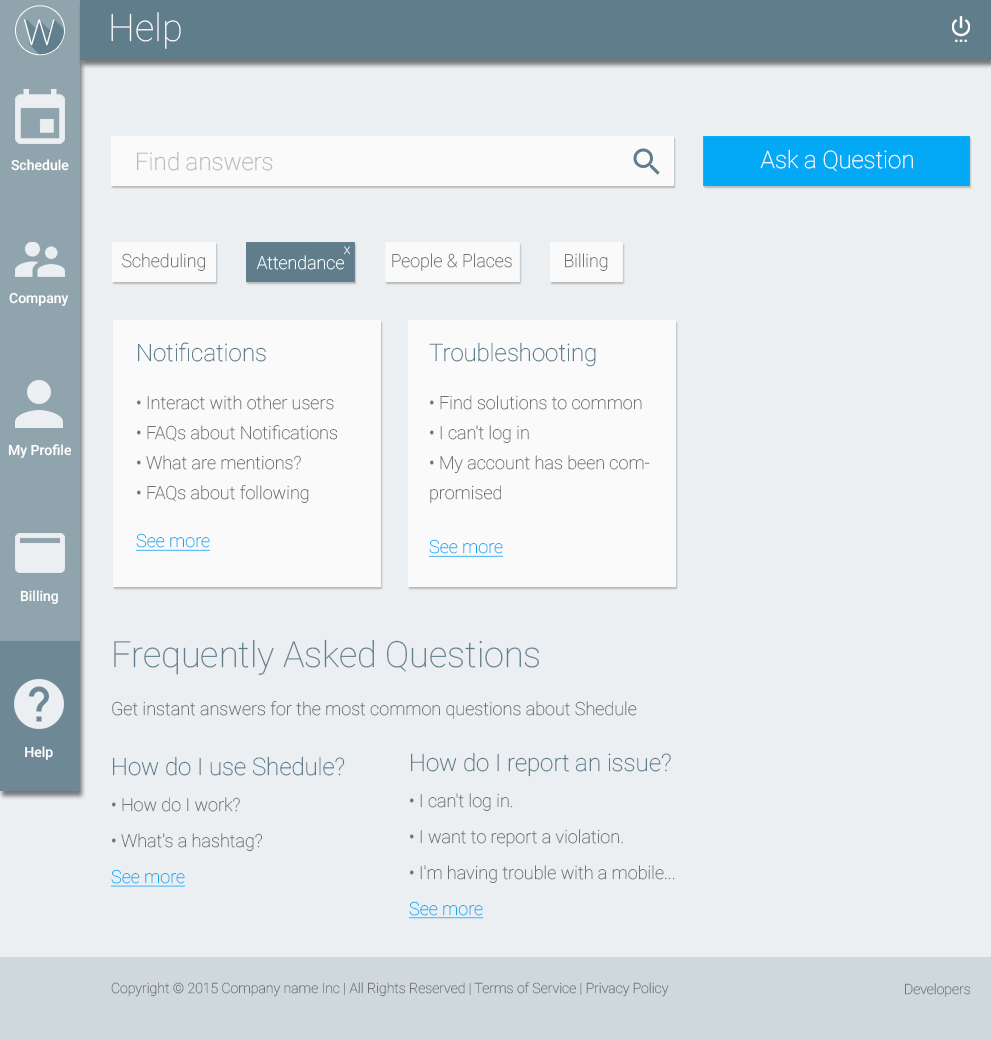
<style>
.page{position:relative;width:991px;height:1039px;background:#eceff1}
.page>*{position:absolute;margin:0}
.t1{font:38px "Roboto-Thin";color:#ffffff}
.t2{font:35.7px "Roboto-Thin";color:#ffffff}
.t3{font:24px "Roboto-Thin";color:#fafafa}
.t4{font:14px "Roboto-Medium";color:#ffffff}
.t5{font:24px "Roboto-Thin";color:#b8b8b8}
.t6{font:14px "Roboto-Thin"}
.t7{font:18px "Roboto-Thin";color:#727272}
.t8{font:18px "Roboto-Thin";color:#ffffff}
.t9{font:18px/30px "Roboto-Thin";color:#727272}
.t10{font:24px "Roboto-Thin";color:#607d8b}
.t11{font:18px/48px "Roboto-Thin";color:#727272}
.t12{font:18px/24px "Roboto-Thin";color:#03a9f4;text-decoration:underline}
.t13{font:18px/30px "Roboto-Thin";color:#03a9f4;text-decoration:underline}
.t14{font:36px "Roboto-Thin";color:#607d8b}
.t15{font:24px/30px "Roboto-Thin";color:#607d8b}
.t16{font:18px/36px "Roboto-Thin";color:#727272}
.t17{font:18px/36px "Roboto-Thin";color:#03a9f4;text-decoration:underline}
.t18{font:24px/48px "Roboto-Thin";color:#607d8b}
.t19{font:14px "Roboto-Thin";color:#727272}
</style>
<div class="page">
<p class="t1" style="left:111px;top:12px;width:70px;height:37px">Help</p>
<p class="t2" style="left:24px;top:19px;width:31px;height:27px">W</p>
<p class="t3" style="left:760px;top:149px;width:153px;height:23px">Ask a Question</p>
<p class="t4" style="left:11px;top:159px;width:58px;height:12px">Schedule</p>
<p class="t5" style="left:137px;top:151px;width:136px;height:20px">Find answers</p>
<p class="t6" style="left:344px;top:246px;width:7px;height:9px">x</p>
<p class="t7" style="left:122px;top:253px;width:83px;height:18px">Scheduling</p>
<p class="t8" style="left:256px;top:255px;width:88px;height:15px">Attendance</p>
<p class="t7" style="left:392px;top:253px;width:120px;height:18px">People &amp; Places</p>
<p class="t7" style="left:565px;top:253px;width:43px;height:18px">Billing</p>
<p class="t4" style="left:9px;top:292px;width:60px;height:14px">Company</p>
<p class="t9" style="left:136px;top:342px;width:201px;height:209px"><span class="t10">Notifications<br></span><span class="t11">• Interact with other users<br></span>• FAQs about Notifications<br>• What are mentions?<br>• FAQs about following<br><br><span class="t12">See more</span></p>
<p class="t9" style="left:429px;top:342px;width:221px;height:215px"><span class="t10">Troubleshooting<br></span><span class="t11">• Find solutions to common <br></span>• I can't log in<br>• My account has been compromised<br><br><span class="t13">See more</span></p>
<p class="t4" style="left:8px;top:444px;width:64px;height:15px">My Profile</p>
<p class="t4" style="left:20px;top:590px;width:38px;height:15px">Billing</p>
<p class="t11" style="left:111px;top:639px;width:526px;height:248px"><span class="t14">Frequently Asked Questions<br></span>Get instant answers for the most common questions about Shedule <br><br><span class="t15">How do I use Shedule?<br></span><span class="t16">• How do I work?<br>• What's a hashtag?<br></span><span class="t17">See more</span></p>
<p class="t4" style="left:25px;top:746px;width:28px;height:14px">Help</p>
<p class="t16" style="left:409px;top:752px;width:266px;height:167px"><span class="t18">How do I report an issue?<br></span>• I can't log in.<br>• I want to report a violation.<br>• I'm having trouble with a mobile...<br><span class="t17">See more</span></p>
<p class="t19" style="left:111px;top:982px;width:558px;height:15px">Copyright © 2015 Company name Inc | All Rights Reserved | Terms of Service | Privacy Policy</p>
<p class="t19" style="left:905px;top:983px;width:65px;height:14px">Developers</p>
</div>
